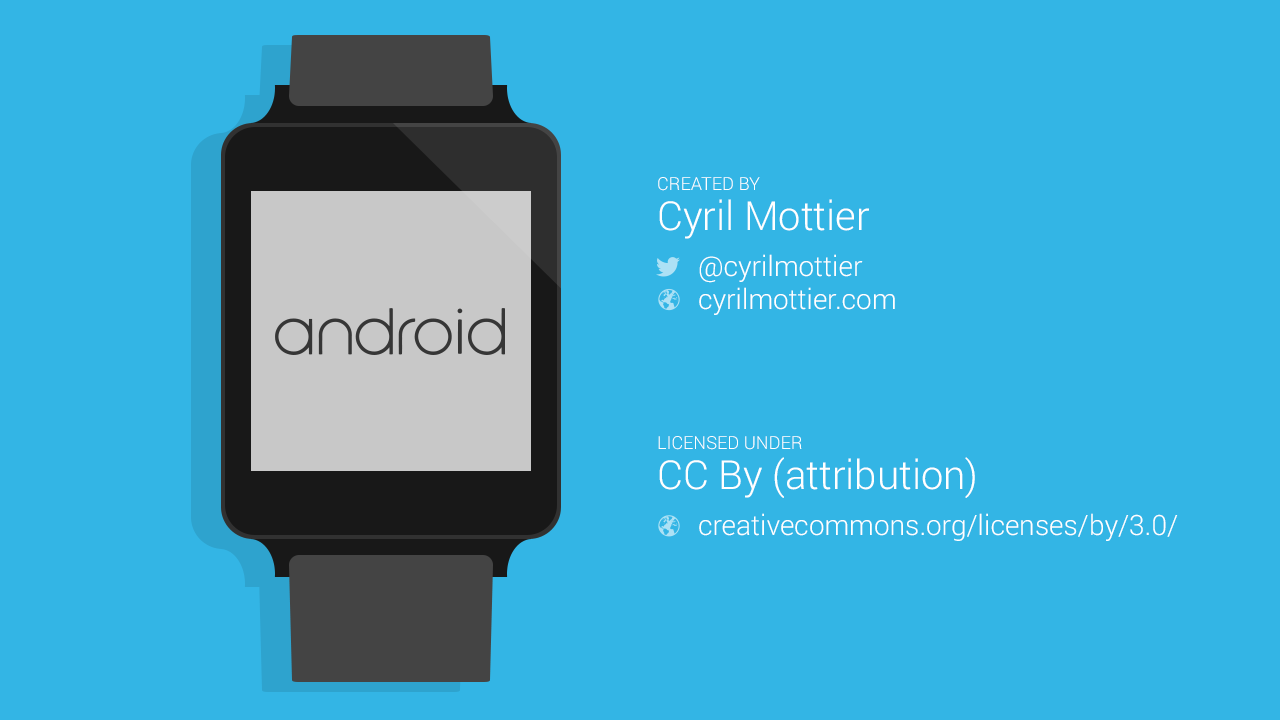
<style>
.page{position:relative;width:1280px;height:720px;background:#33b5e5}
.page>*{position:absolute;margin:0}
.t1{font:28px "Roboto-Light";color:#ffffff}
.t2{font:18px/40px "Roboto-Light";color:#ffffff}
.t3{font:40px/40px "Roboto-Light";color:#ffffff}
</style>
<div class="page">
<p class="t1" style="left:658px;top:177px;width:237px;height:138px"><span class="t2">CREATED BY<br></span><span class="t3">Cyril Mottier<br> <br>      </span>@cyrilmottier<br>      cyrilmottier.com</p>
<p class="t1" style="left:658px;top:436px;width:520px;height:105px"><span class="t2">LICENSED UNDER<br></span><span class="t3">CC By (attribution)<br> <br>      </span>creativecommons.org/licenses/by/3.0/</p>
</div>
